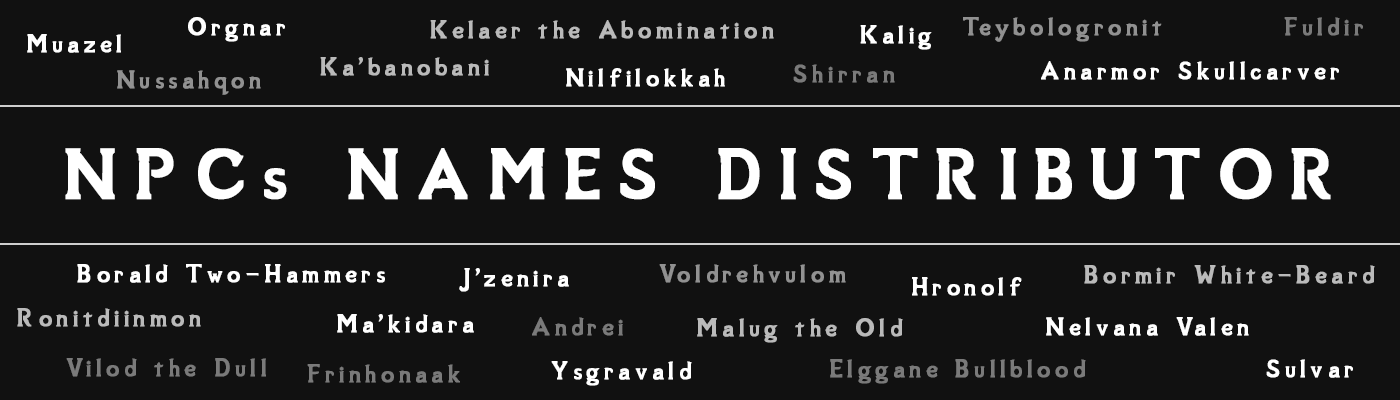
<style>
.page{position:relative;width:1400px;height:400px;background:#111111}
.page>*{position:absolute;margin:0}
.t1{font:32px "SovngardeLight";letter-spacing:0.14em;color:#ffffff;font-weight:bold}
.t2{font:32px "SovngardeLight";letter-spacing:0.14em;color:#919191;font-weight:bold}
.t3{font:32px "SovngardeLight";letter-spacing:0.14em;color:#7a7a7a;font-weight:bold}
.t4{font:32px "SovngardeLight";letter-spacing:0.14em;color:#bababa;font-weight:bold}
.t5{font:90px "SovngardeLight";letter-spacing:0.18em;color:#ffffff;font-weight:bold}
</style>
<div class="page">
<p class="t1" style="left:188px;top:17px;width:97px;height:25px">Orgnar</p>
<p class="t2" style="left:963px;top:17px;width:199px;height:25px">Teybologronit</p>
<p class="t3" style="left:1284px;top:17px;width:79px;height:19px">Fuldir</p>
<p class="t4" style="left:430px;top:20px;width:344px;height:19px">Kelaer the Abomination</p>
<p class="t1" style="left:860px;top:25px;width:72px;height:25px">Kalig</p>
<p class="t1" style="left:27px;top:34px;width:94px;height:19px">Muazel</p>
<p class="t4" style="left:320px;top:57px;width:169px;height:19px">Ka'banobani</p>
<p class="t3" style="left:793px;top:64px;width:102px;height:19px">Shirran</p>
<p class="t1" style="left:1041px;top:61px;width:298px;height:19px">Anarmor Skullcarver</p>
<p class="t2" style="left:117px;top:70px;width:144px;height:25px">Nussahqon</p>
<p class="t1" style="left:566px;top:68px;width:159px;height:19px">Nilfilokkah</p>
<p class="t5" style="left:65px;top:148px;width:1266px;height:52px">NPCs NAMES DISTRIBUTOR</p>
<p class="t1" style="left:77px;top:264px;width:308px;height:19px">Borald Two-Hammers</p>
<p class="t1" style="left:459px;top:268px;width:110px;height:24px">J'zenira</p>
<p class="t2" style="left:659px;top:264px;width:187px;height:19px">Voldrehvulom</p>
<p class="t4" style="left:1084px;top:265px;width:291px;height:19px">Bormir White-Beard</p>
<p class="t1" style="left:912px;top:277px;width:110px;height:19px">Hronolf</p>
<p class="t4" style="left:17px;top:308px;width:184px;height:19px">Ronitdiinmon</p>
<p class="t1" style="left:337px;top:314px;width:137px;height:19px">Ma'kidara</p>
<p class="t3" style="left:532px;top:317px;width:91px;height:19px">Andrei</p>
<p class="t4" style="left:697px;top:318px;width:206px;height:25px">Malug the Old</p>
<p class="t1" style="left:1046px;top:317px;width:203px;height:19px">Nelvana Valen</p>
<p class="t3" style="left:66px;top:358px;width:200px;height:19px">Vilod the Dull</p>
<p class="t3" style="left:307px;top:364px;width:153px;height:19px">Frinhonaak</p>
<p class="t1" style="left:551px;top:361px;width:141px;height:25px">Ysgravald</p>
<p class="t3" style="left:830px;top:359px;width:256px;height:25px">Elggane Bullblood</p>
<p class="t1" style="left:1266px;top:359px;width:87px;height:19px">Sulvar</p>
</div>
